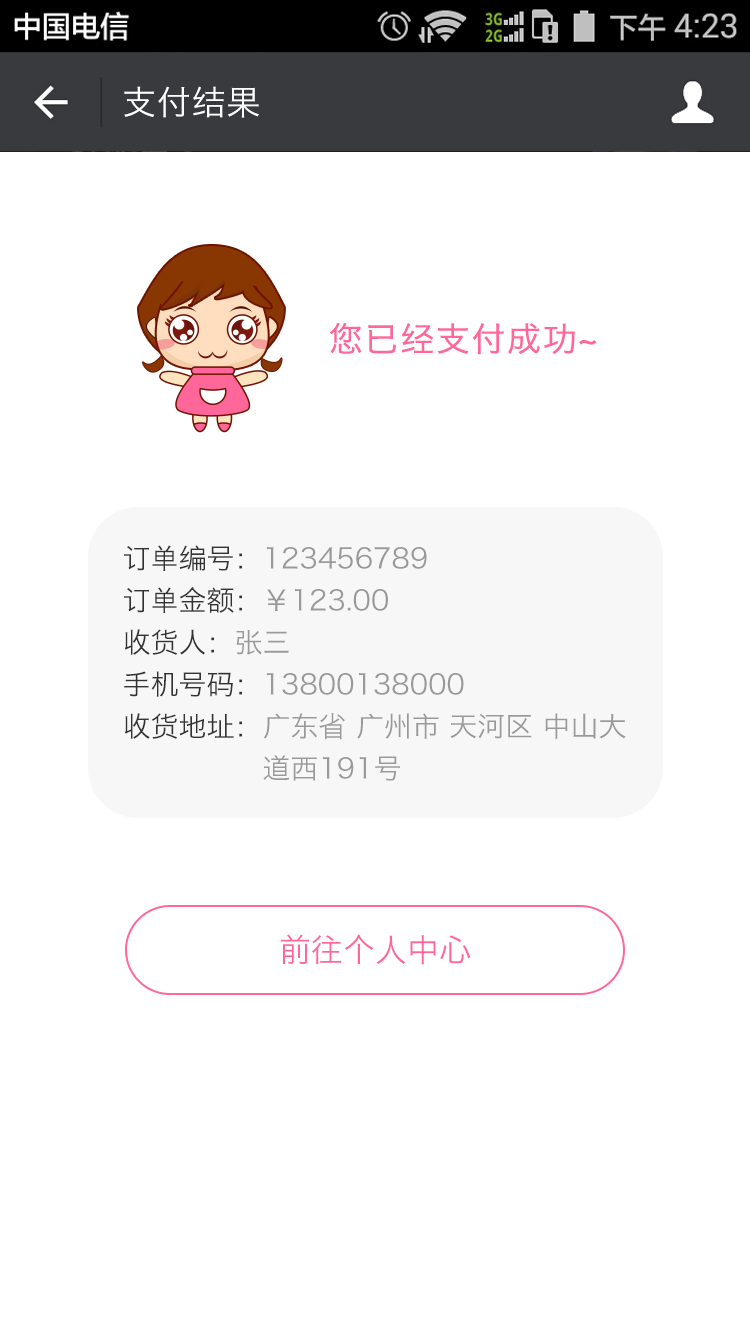
<style>
.page{position:relative;width:750px;height:1334px;background:#ffffff}
.page>*{position:absolute;margin:0}
.t1{font:34px "HiraginoSansGB-W3";letter-spacing:0.022em;color:#ffffff}
.t2{font:34px "HiraginoSansGB-W3";letter-spacing:0.022em;color:#ff6699;font-weight:bold}
.t3{font:28px/40px "HiraginoSansGB-W3";color:#999999}
.t4{font:28px/40px "HiraginoSansGB-W3";color:#333333}
.t5{font:32px "HiraginoSansGB-W3";color:#ff6699}
</style>
<div class="page">
<p class="t1" style="left:124px;top:86px;width:135px;height:32px">支付结果</p>
<p class="t2" style="left:330px;top:323px;width:267px;height:32px">您已经支付成功~</p>
<p class="t3" style="left:124px;top:545px;width:502px;height:236px"><span class="t4">订单编号：</span>123456789<br><span class="t4">订单金额：</span>￥123.00<br><span class="t4">收货人：</span>张三<br><span class="t4">手机号码：</span>13800138000<br><span class="t4">收货地址：</span>广东省 广州市 天河区 中山大<br>               道西191号</p>
<p class="t5" style="left:280px;top:934px;width:191px;height:31px">前往个人中心</p>
</div>
